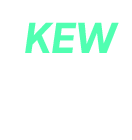
<style>
.page{position:relative;width:132px;height:140px;background:#ffffff}
.page>*{position:absolute;margin:0}
.t1{font:40.4px "PlusJakartaSansItalic-ExtraBoldItalic";color:#50ffb1}
</style>
<div class="page">
<p class="t1" style="left:25px;top:22px;width:94px;height:31px">KEW</p>
</div>
